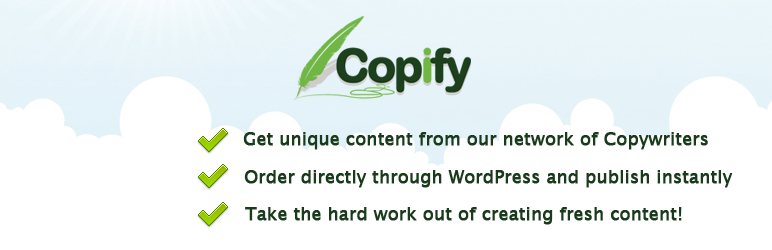
<style>
.page{position:relative;width:772px;height:250px;background:#ffffff}
.page>*{position:absolute;margin:0}
.t1{font:18px "LucidaGrande";letter-spacing:-0.02em;color:#1a3b1b;font-weight:bold}
</style>
<div class="page">
<p class="t1" style="left:243px;top:132px;width:465px;height:18px">Get unique content from our network of Copywriters</p>
<p class="t1" style="left:244px;top:170px;width:489px;height:18px">Order directly through WordPress and publish instantly</p>
<p class="t1" style="left:245px;top:207px;width:437px;height:18px">Take the hard work out of creating fresh content!</p>
</div>
